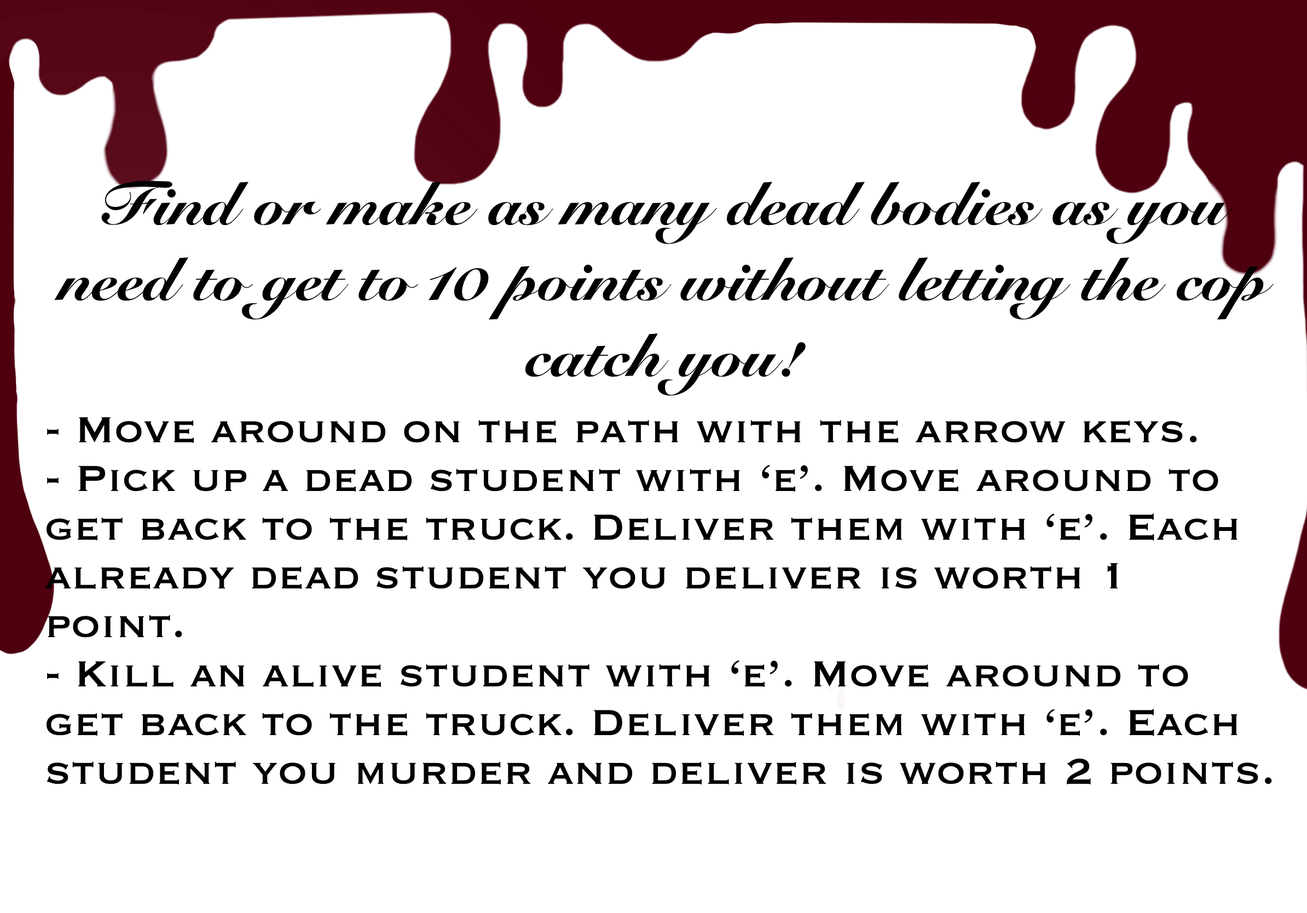
<style>
.page{position:relative;width:1307px;height:913px;background:#ffffff}
.page>*{position:absolute;margin:0}
.t1{font:47.5px "Copperplate";color:#000000}
.t2{font:60.2px "SnellRoundhand-Black";color:#000000}
</style>
<div class="page">
<p class="t1" style="left:0px;top:0px;width:1307px;height:913px;text-align:center"><span class="t2">Find or make as many dead bodies as you need to get to 10 points without letting the cop catch you!<br></span>- Move around on the path with the arrow keys.<br>- Pick up a dead student with ‘e’. Move around to get back to the truck. Deliver them with ‘e’. Each already dead student you deliver is worth 1 point.<br>- Kill an alive student with ‘e’. Move around to get back to the truck. Deliver them with ‘e’. Each student you murder and deliver is worth 2 points.</p>
</div>
